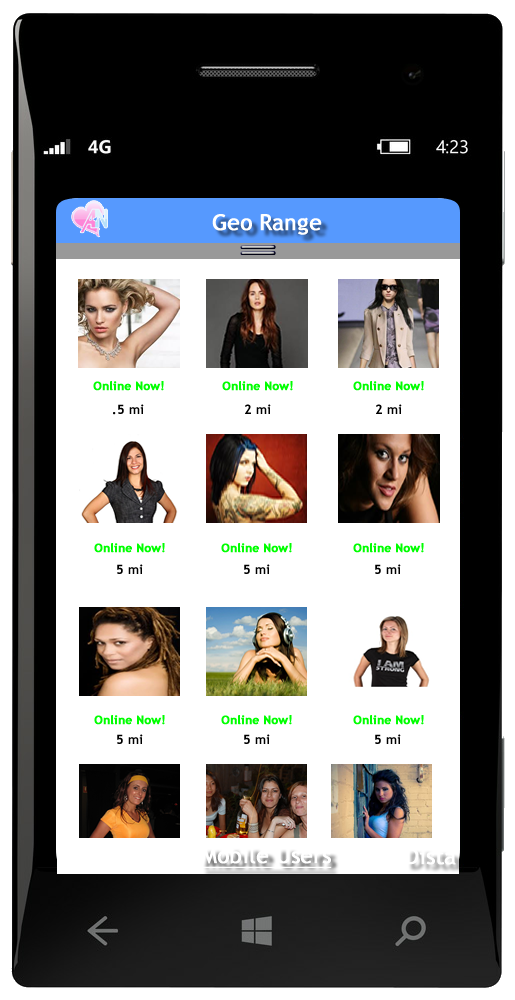
<style>
.page{position:relative;width:515px;height:1000px;background:#ffffff}
.page>*{position:absolute;margin:0}
.t1{font:22px "TrebuchetMS";color:#ffffff;font-weight:bold}
.t2{font:12px "TrebuchetMS-Bold";color:#00ff00;font-weight:bold}
.t3{font:13px "TrebuchetMS-Bold";color:#000000}
.t4{font:22px "TrebuchetMS";color:#ffffff;font-weight:bold;text-decoration:underline}
</style>
<div class="page">
<p class="t1" style="left:212px;top:214px;width:110px;height:21px">Geo Range</p>
<p class="t2" style="left:93px;top:381px;width:71px;height:10px">Online Now!</p>
<p class="t2" style="left:222px;top:381px;width:71px;height:10px">Online Now!</p>
<p class="t2" style="left:353px;top:381px;width:71px;height:10px">Online Now!</p>
<p class="t3" style="left:113px;top:404px;width:31px;height:11px">.5 mi</p>
<p class="t3" style="left:245px;top:404px;width:26px;height:10px">2 mi</p>
<p class="t3" style="left:376px;top:404px;width:26px;height:10px">2 mi</p>
<p class="t2" style="left:94px;top:543px;width:71px;height:10px">Online Now!</p>
<p class="t2" style="left:221px;top:543px;width:71px;height:10px">Online Now!</p>
<p class="t2" style="left:353px;top:543px;width:71px;height:10px">Online Now!</p>
<p class="t3" style="left:117px;top:564px;width:26px;height:10px">5 mi</p>
<p class="t3" style="left:244px;top:564px;width:26px;height:10px">5 mi</p>
<p class="t3" style="left:375px;top:564px;width:26px;height:10px">5 mi</p>
<p class="t2" style="left:94px;top:715px;width:71px;height:10px">Online Now!</p>
<p class="t2" style="left:221px;top:715px;width:71px;height:10px">Online Now!</p>
<p class="t2" style="left:353px;top:715px;width:71px;height:10px">Online Now!</p>
<p class="t3" style="left:117px;top:734px;width:26px;height:10px">5 mi</p>
<p class="t3" style="left:244px;top:734px;width:26px;height:10px">5 mi</p>
<p class="t3" style="left:375px;top:734px;width:26px;height:10px">5 mi</p>
<p class="t4" style="left:201px;top:846px;width:131px;height:22px">Mobile Users</p>
<p class="t1" style="left:406px;top:848px;width:50px;height:17px;opacity:0.7">Dista</p>
</div>
